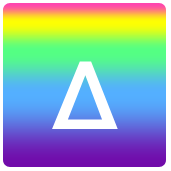
<style>
.page{position:relative;width:171px;height:171px}
.page>*{position:absolute;margin:0}
.t1{font:95.1px "Roboto-Medium";color:#ffffff}
</style>
<div class="page">
<p class="t1" style="left:52px;top:61px;width:66px;height:68px">∆</p>
</div>
